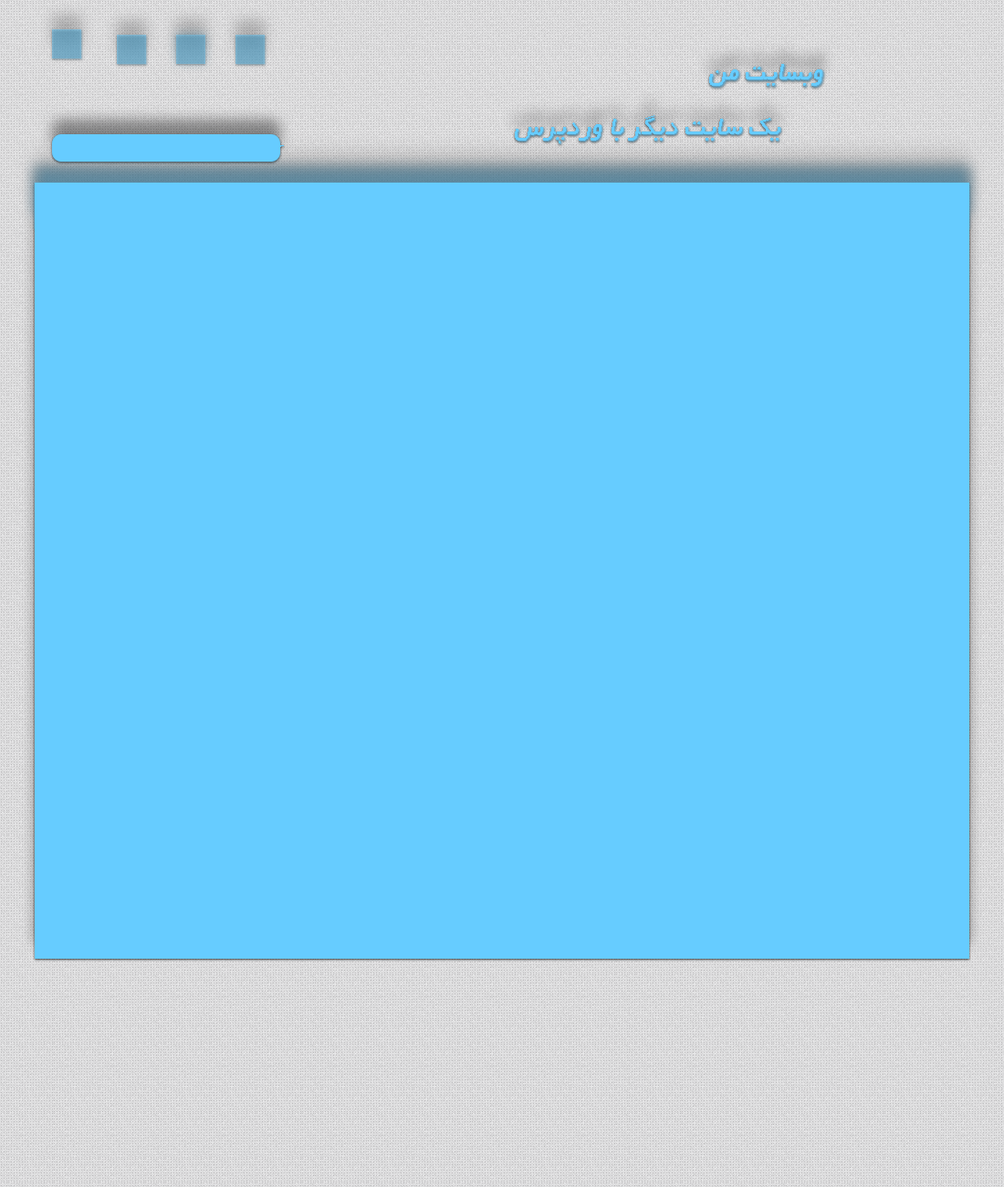
<style>
.page{position:relative;width:1004px;height:1187px;background:#66ccff}
.page>*{position:absolute;margin:0}
.t1{font:27.4px "BYekan";color:#66ccff;font-style:italic}
</style>
<div class="page">
<p class="t1" style="left:710px;top:64px;width:113px;height:22px">وبسايت من</p>
<p class="t1" style="left:515px;top:115px;width:266px;height:28px">يك سايت ديگر با وردپرس</p>
</div>
